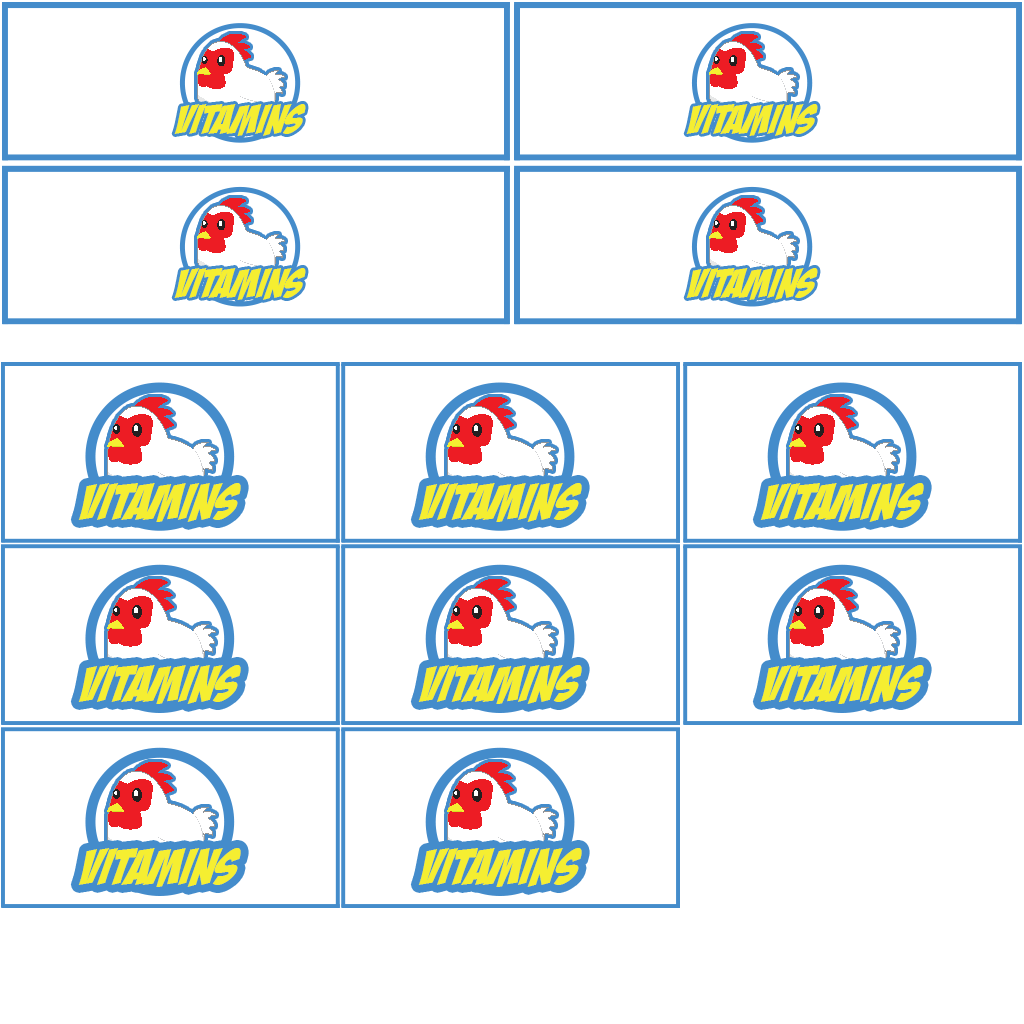
<style>
.page{position:relative;width:1024px;height:1024px;background:#ffffff}
.page>*{position:absolute;margin:0}
.t1{font:40.7px "BadaBoomBB";color:#f5ee31;text-transform:uppercase;font-style:italic}
.t2{font:50.5px "BadaBoomBB";color:#f5ee31;text-transform:uppercase;font-style:italic}
</style>
<div class="page">
<p class="t1" style="left:174px;top:104px;width:132px;height:32px">Vitamins</p>
<p class="t1" style="left:686px;top:104px;width:132px;height:32px">Vitamins</p>
<p class="t1" style="left:174px;top:268px;width:132px;height:32px">Vitamins</p>
<p class="t1" style="left:686px;top:268px;width:132px;height:32px">Vitamins</p>
<p class="t2" style="left:78px;top:483px;width:163px;height:39px">Vitamins</p>
<p class="t2" style="left:418px;top:483px;width:164px;height:39px">Vitamins</p>
<p class="t2" style="left:760px;top:483px;width:164px;height:39px">Vitamins</p>
<p class="t2" style="left:78px;top:665px;width:163px;height:39px">Vitamins</p>
<p class="t2" style="left:418px;top:665px;width:164px;height:39px">Vitamins</p>
<p class="t2" style="left:760px;top:665px;width:164px;height:39px">Vitamins</p>
<p class="t2" style="left:78px;top:848px;width:163px;height:39px">Vitamins</p>
<p class="t2" style="left:418px;top:848px;width:164px;height:39px">Vitamins</p>
</div>
